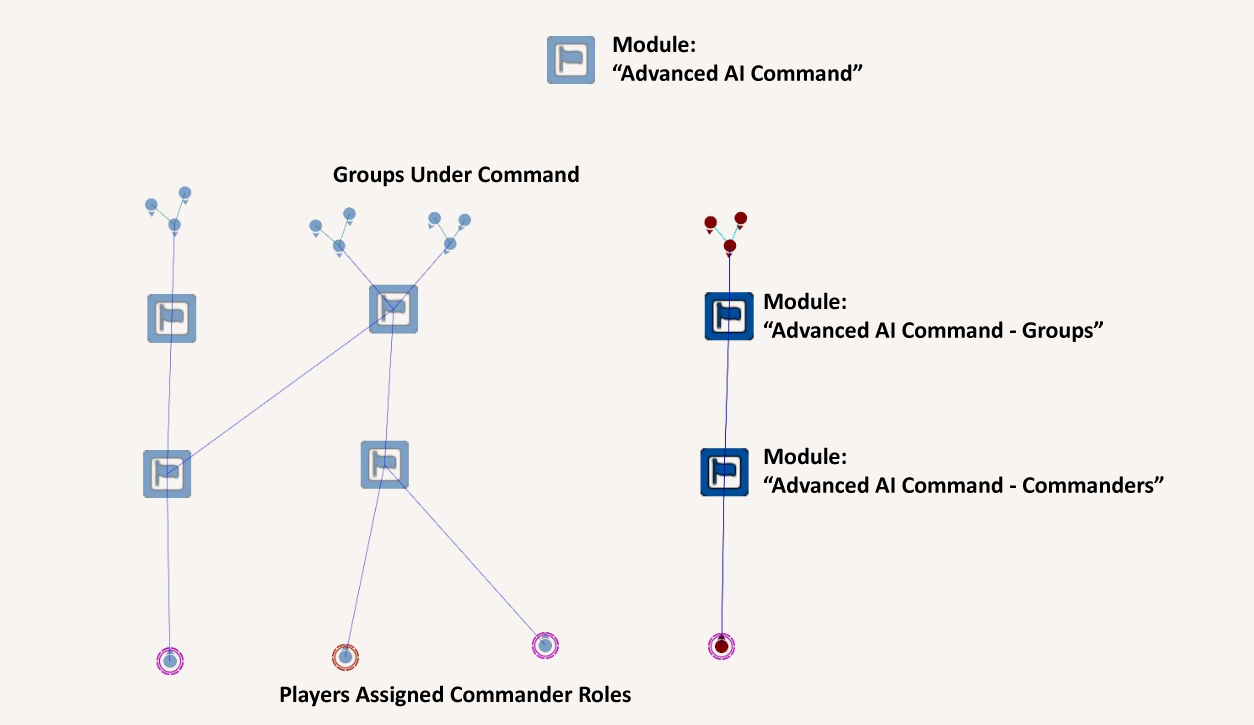
<style>
.page{position:relative;width:1254px;height:725px;background:#f8f4f1}
.page>*{position:absolute;margin:0}
.t1{font:24px "Calibri-Bold";color:#000000}
</style>
<div class="page">
<p class="t1" style="left:613px;top:35px;width:250px;height:46px">Module:<br>“Advanced AI Command”</p>
<p class="t1" style="left:333px;top:165px;width:246px;height:22px">Groups Under Command</p>
<p class="t1" style="left:764px;top:292px;width:339px;height:50px">Module:<br>“Advanced AI Command - Groups”</p>
<p class="t1" style="left:764px;top:447px;width:400px;height:46px">Module:<br>“Advanced AI Command - Commanders”</p>
<p class="t1" style="left:280px;top:685px;width:351px;height:22px">Players Assigned Commander Roles</p>
</div>
